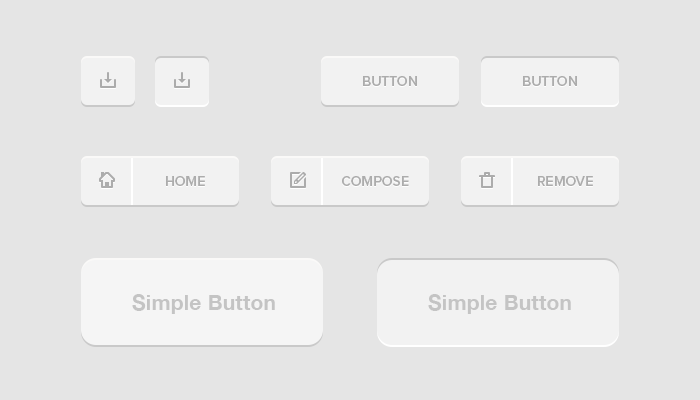
<style>
.page{position:relative;width:700px;height:400px;background:#e5e5e5}
.page>*{position:absolute;margin:0}
.t1{font:14.3px "ProximaNova-Semibold";color:#acacac;text-transform:uppercase}
.t2{font:21.4px "HelveticaNeue-Bold";letter-spacing:0.01em;color:#c4c4c4}
</style>
<div class="page">
<p class="t1" style="left:363px;top:76px;width:54px;height:10px">Button</p>
<p class="t1" style="left:523px;top:76px;width:54px;height:10px">Button</p>
<p class="t1" style="left:166px;top:176px;width:39px;height:10px">home</p>
<p class="t1" style="left:342px;top:176px;width:67px;height:10px">compose</p>
<p class="t1" style="left:538px;top:176px;width:55px;height:10px">remove</p>
<p class="t2" style="left:132px;top:294px;width:143px;height:20px">Simple Button</p>
<p class="t2" style="left:428px;top:294px;width:143px;height:20px">Simple Button</p>
</div>
